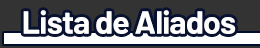
<style>
.page{position:relative;width:260px;height:48px;background:#333333}
.page>*{position:absolute;margin:0}
.t1{font:32px "Barlow-Bold";letter-spacing:-0.025em;color:#ffffff}
</style>
<div class="page">
<p class="t1" style="left:23px;top:10px;width:213px;height:24px">Lista de Aliados</p>
</div>
